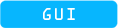
<style>
.page{position:relative;width:118px;height:28px;background:#07b6fe}
.page>*{position:absolute;margin:0}
.t1{font:15px "OCRAStd";letter-spacing:0.1em;color:#ffffff}
</style>
<div class="page">
<p class="t1" style="left:43px;top:8px;width:32px;height:12px">GUI</p>
</div>
